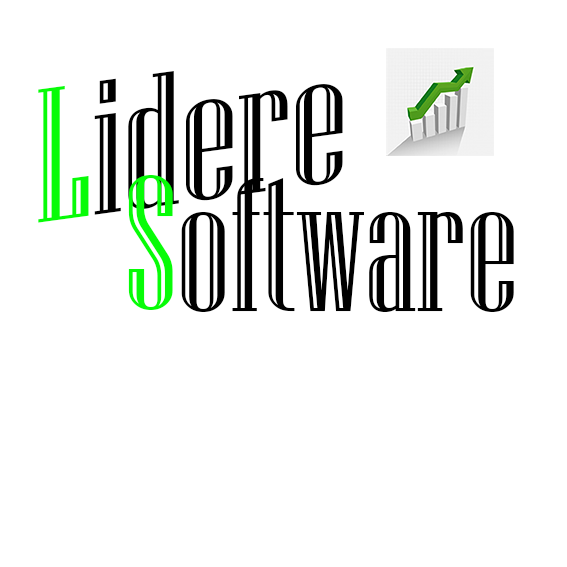
<style>
.page{position:relative;width:567px;height:567px;background:#ffffff}
.page>*{position:absolute;margin:0}
.t1{font:189.9px "NiagaraEngraved-Reg";color:#000000;scale:1.09 1}
.t2{font:189.9px "NiagaraEngraved-Reg";color:#07fc07;scale:1.09 1}
.t3{font:189.9px "NiagaraEngraved-Reg";color:#07fc07}
.t4{font:189.9px "NiagaraEngraved-Reg";color:#000000}
</style>
<div class="page">
<p class="t1" style="left:38px;top:71px;width:305px;height:152px;rotate:-8deg"><span class="t2">L</span>idere</p>
<p class="t3" style="left:128px;top:175px;width:45px;height:135px">S</p>
<p class="t4" style="left:181px;top:178px;width:333px;height:134px">oftware</p>
</div>
